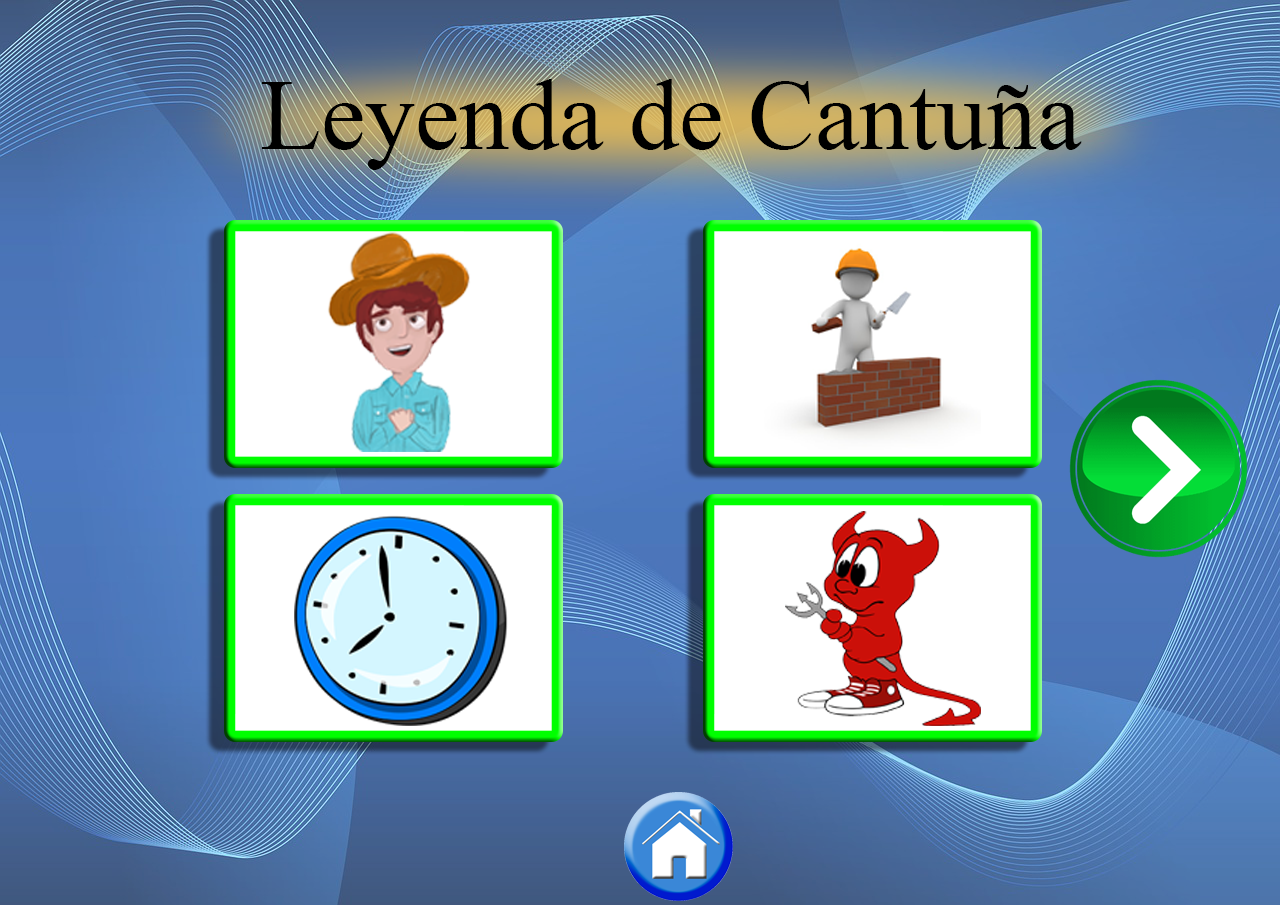
<style>
.page{position:relative;width:1280px;height:905px}
.page>*{position:absolute;margin:0}
.t1{font:100px "TimesNewRomanPSMT";color:#000000}
</style>
<div class="page">
<p class="t1" style="left:262px;top:79px;width:820px;height:91px">Leyenda de Cantuña</p>
</div>
